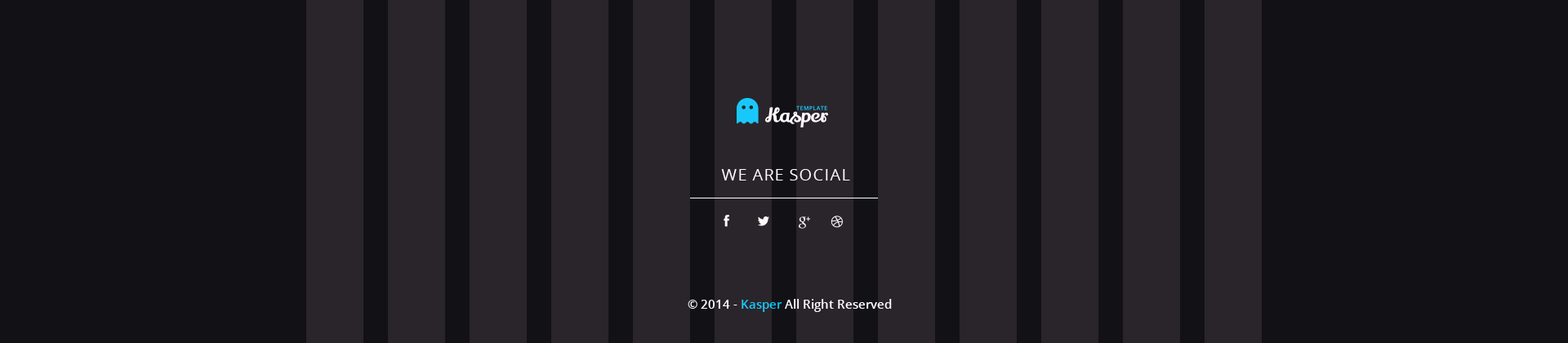
<style>
.page{position:relative;width:1568px;height:343px;background:#121116}
.page>*{position:absolute;margin:0}
.t1{font:16.3px "OpenSans";letter-spacing:0.05em;color:#ffffff}
.t2{font:12.2px "OpenSans-Semibold";color:#ffffff}
.t3{font:12.2px "OpenSans-Semibold";color:#00c7fc}
</style>
<div class="page">
<p class="t1" style="left:721px;top:169px;width:129px;height:11px">WE ARE SOCIAL</p>
<p class="t2" style="left:688px;top:299px;width:204px;height:13px">© 2014 - <span class="t3">Kasper </span>All Right Reserved</p>
</div>
